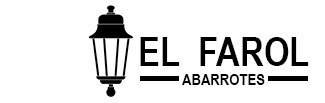
<style>
.page{position:relative;width:325px;height:103px;background:#ffffff}
.page>*{position:absolute;margin:0}
.t1{font:40px "ArialNarrow-Bold";color:#000000}
.t2{font:16px "ArialNarrow-Bold";color:#000000}
</style>
<div class="page">
<p class="t1" style="left:140px;top:37px;width:169px;height:48px;text-align:center">EL  FAROL<br><span class="t2">ABARROTES</span></p>
</div>
